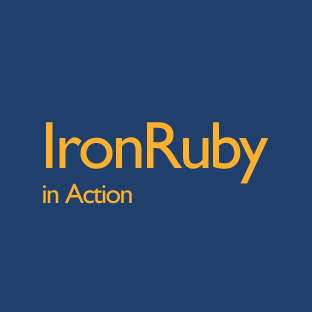
<style>
.page{position:relative;width:312px;height:312px;background:#1f406d}
.page>*{position:absolute;margin:0}
.t1{font:27.9px/34.4px "GillSans";letter-spacing:-0.05em;color:#fdb02c}
.t2{font:67px/34.4px "GillSans";letter-spacing:-0.05em;color:#fdb02c}
</style>
<div class="page">
<p class="t1" style="left:43px;top:122px;width:226px;height:82px"><span class="t2">IronRuby<br></span>in Action</p>
</div>
